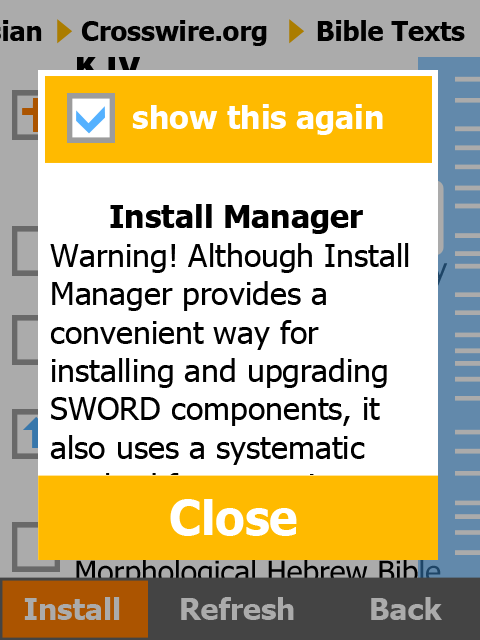
<style>
.page{position:relative;width:480px;height:640px;background:#ffffff}
.page>*{position:absolute;margin:0}
.t1{font:26.8px "Tahoma-Bold";color:#000000}
.t2{font:32px "Tahoma-Bold";color:#ffffff}
.t3{font:32px "Tahoma";color:#000000}
.t4{font:32px "Tahoma-Bold";color:#000000}
.t5{font:48px "Tahoma-Bold";color:#ffffff}
.t6{font:30px "Tahoma-Bold";color:#ababab}
</style>
<div class="page">
<p class="t1" style="left:81px;top:20px;width:186px;height:26px">Crosswire.org</p>
<p class="t1" style="left:317px;top:20px;width:148px;height:21px">Bible Texts</p>
<p class="t2" style="left:132px;top:104px;width:251px;height:31px">show this again</p>
<p class="t3" style="left:50px;top:204px;width:367px;height:414px;text-align:center"><span class="t4">Install Manager</span><br>Warning! Although Install Manager provides a convenient way for installing and upgrading SWORD components, it also uses a systematic method for accessing sites which gives packet sniffers a target to lock into for singling out users.</p>
<p class="t5" style="left:170px;top:499px;width:127px;height:37px">Close</p>
<p class="t6" style="left:24px;top:597px;width:96px;height:23px">Install</p>
<p class="t6" style="left:181px;top:597px;width:113px;height:23px">Refresh</p>
<p class="t6" style="left:371px;top:597px;width:71px;height:23px">Back</p>
</div>
